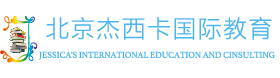
<style>
.page{position:relative;width:280px;height:78px;background:#ffffff}
.page>*{position:absolute;margin:0}
.t1{font:24px "FZLTXHK--GBK1-0";letter-spacing:0.09em;color:#4cb5ee;scale:0.97 1}
.t2{font:9px "Athelas-Regular";letter-spacing:-0.01em;color:#4cb5ee;scale:0.97 1}
</style>
<div class="page">
<p class="t1" style="left:46px;top:17px;width:226px;height:23px">北京杰西卡国际教育</p>
<p class="t2" style="left:39px;top:51px;width:236px;height:9px">JESSICA'S INTERNATIONAL EDUCATION AND CINSULTING</p>
</div>
